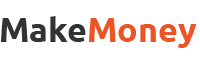
<style>
.page{position:relative;width:200px;height:60px;background:#ffffff}
.page>*{position:absolute;margin:0}
.t1{font:34px "Ubuntu-Bold";color:#eb5424}
.t2{font:34px "Ubuntu-Bold";color:#333333}
</style>
<div class="page">
<p class="t1" style="left:1px;top:16px;width:196px;height:32px"><span class="t2">Make</span>Money</p>
</div>
